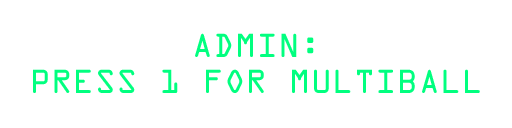
<style>
.page{position:relative;width:512px;height:128px;background:#ffffff}
.page>*{position:absolute;margin:0}
.t1{font:30px "OCRAStd";color:#01ff7f}
</style>
<div class="page">
<p class="t1" style="left:33px;top:33px;width:447px;height:60px;text-align:center">ADMIN:<br>PRESS 1 FOR MULTIBALL</p>
</div>
